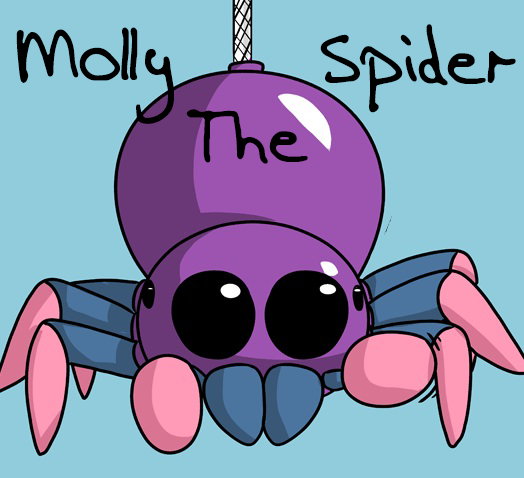
<style>
.page{position:relative;width:524px;height:478px;background:#91ccdc}
.page>*{position:absolute;margin:0}
.t1{font:80px "AEnigmaScrawl4BRK";color:#000000}
</style>
<div class="page">
<p class="t1" style="left:16px;top:27px;width:158px;height:97px">Molly</p>
<p class="t1" style="left:320px;top:24px;width:196px;height:89px">Spider</p>
<p class="t1" style="left:186px;top:109px;width:122px;height:55px">The</p>
</div>
